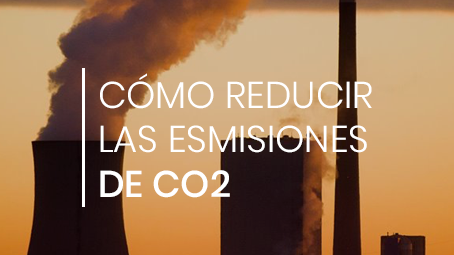
<style>
.page{position:relative;width:454px;height:255px}
.page>*{position:absolute;margin:0}
.t1{font:37.2px "Poppins-Light";color:#ffffff}
.t2{font:37.2px "Poppins-Medium";color:#ffffff}
</style>
<div class="page">
<p class="t1" style="left:100px;top:73px;width:272px;height:125px">CÓMO REDUCIR <br>LAS ESMISIONES <br><span class="t2">DE CO2</span></p>
</div>
